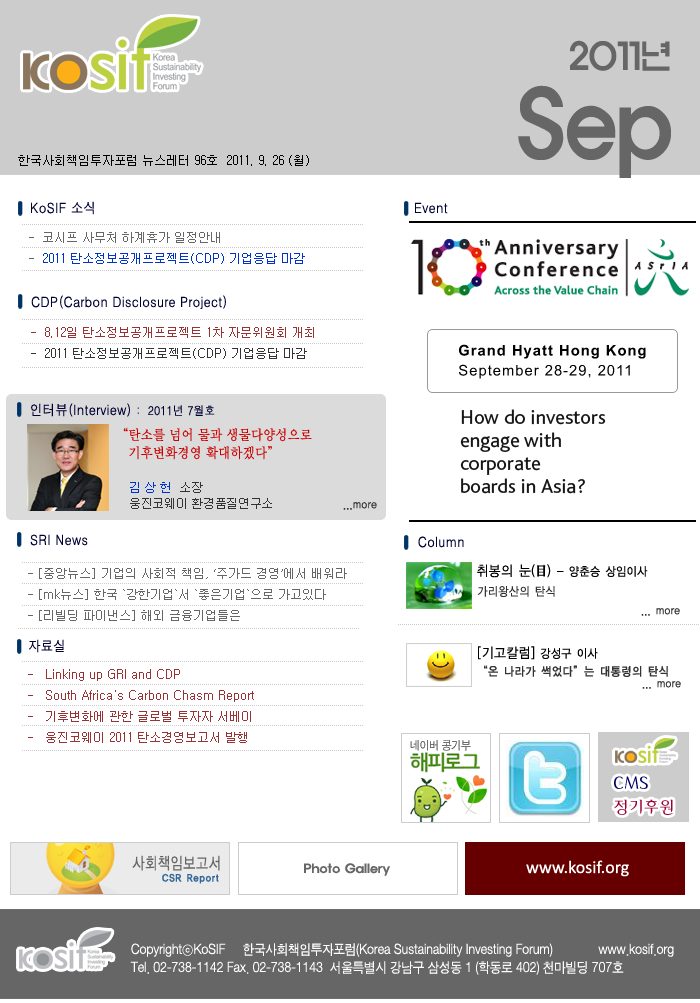
<style>
.page{position:relative;width:700px;height:1003px;background:#ffffff}
.page>*{position:absolute;margin:0}
.t1{font:36.1px/41.9px "ExpoM-HM";color:#666666;scale:0.89 1}
.t2{font:90.2px/41.9px "ExpoM-HM";color:#666666;scale:0.89 1}
.t3{font:12px "Gulim";color:#000000}
.t4{font:14px "H2gtrM";color:#000033;scale:0.9 1}
.t5{font:12px "Gulim";color:#0033cc}
.t6{font:12px "Gulim";color:#666666}
.t7{font:12px "Gulim";color:#993333}
.t8{font:12px "Gulim";color:#333333}
.t9{font:12px "H2gtrM";color:#000033;scale:0.9 1}
.t10{font:14px/18px "Ymjo420";letter-spacing:-0.025em;color:#cc0000;scale:0.9 1}
.t11{font:14px/12px "Ymjo420";letter-spacing:-0.025em;color:#cc0000;scale:0.9 1}
.t12{font:12px/16px "Gulim";letter-spacing:-0.025em;color:#333333}
.t13{font:12px/16px "Gulim";letter-spacing:-0.025em;color:#0033cc}
.t14{font:12px "YDIYGO120-KSCpc-EUC-H";letter-spacing:-0.025em;color:#333333;scale:0.9 1}
.t15{font:12px "YDIYGO120-KSCpc-EUC-H";letter-spacing:-0.025em;color:#000000;scale:0.9 1}
.t16{font:14px "YDIYGO120-KSCpc-EUC-H";letter-spacing:-0.025em;color:#000000;scale:0.9 1}
.t17{font:14px "YDIYMjO150";letter-spacing:-0.025em;color:#000000;scale:0.9 1}
.t18{font:12px "YDIYGO130-KSCpc-EUC-H";letter-spacing:-0.01em;color:#333333;scale:0.9 1}
.t19{font:12px "ExpoM-HM";color:#666666}
.t20{font:18px "Calibri";color:#ffffff}
.t21{font:14px/18px "SandJg";color:#ffffff;scale:0.9 1}
</style>
<div class="page">
<p class="t1" style="left:518px;top:40px;width:153px;height:138px;text-align:right">2011년<br><span class="t2">Sep</span></p>
<p class="t3" style="left:18px;top:155px;width:291px;height:11px">한국사회책임투자포럼 뉴스레터 96호  2011. 9. 26 (월)</p>
<p class="t4" style="left:31px;top:201px;width:63px;height:14px">KoSIF 소식</p>
<p class="t4" style="left:415px;top:202px;width:33px;height:12px">Event</p>
<p class="t5" style="left:29px;top:232px;width:276px;height:32px"><span class="t6">-  코시프 사무처 하계휴가 일정안내<br>-  </span>2011 탄소정보공개프로젝트(CDP) 기업응답 마감</p>
<p class="t4" style="left:31px;top:295px;width:195px;height:14px">CDP(Carbon Disclosure Project)</p>
<p class="t7" style="left:31px;top:327px;width:283px;height:32px">-  8.12일 탄소정보공개프로젝트 1차 자문위원회 개최 <br><span class="t8">-  2011 탄소정보공개프로젝트(CDP) 기업응답 마감</span></p>
<p class="t4" style="left:31px;top:403px;width:184px;height:14px">인터뷰(Interview) <span class="t9">:  2011년 7월호</span></p>
<p class="t10" style="left:123px;top:427px;width:189px;height:33px"><span class="t11">“탄소를 넘어 물과 생</span>물다양성으로 <br>   기후변화경영 확대<span class="t11">하겠다”</span></p>
<p class="t12" style="left:130px;top:482px;width:142px;height:27px"><span class="t13">김 상 헌  </span>소장 <br>웅진코웨이 환경품질연구소</p>
<p class="t14" style="left:343px;top:502px;width:34px;height:8px">...more</p>
<p class="t4" style="left:30px;top:534px;width:58px;height:12px">SRI News</p>
<p class="t4" style="left:418px;top:536px;width:46px;height:12px">Column</p>
<p class="t6" style="left:28px;top:568px;width:319px;height:53px">- [중앙뉴스] 기업의 사회적 책임, ‘주가드 경영’에서 배워라  <br>- [mk뉴스] 한국 `강한기업`서 `좋은기업`으로 가고있다 <br>- [리빌딩 파이낸스] 해외 금융기업들은</p>
<p class="t15" style="left:477px;top:564px;width:171px;height:14px"><span class="t16">취봉의 눈(</span><span class="t17">目</span><span class="t16">) </span>- 양춘승 상임이사</p>
<p class="t14" style="left:477px;top:586px;width:78px;height:11px">가리왕산의 탄식</p>
<p class="t14" style="left:641px;top:608px;width:39px;height:8px">... more</p>
<p class="t4" style="left:29px;top:639px;width:35px;height:14px">자료실</p>
<p class="t16" style="left:478px;top:646px;width:120px;height:14px">[기고칼럼]<span class="t15"> 강성구 이사</span></p>
<p class="t18" style="left:484px;top:665px;width:184px;height:12px">“온 나라가 썩었다”는 대통령의 탄식</p>
<p class="t7" style="left:28px;top:669px;width:226px;height:74px">-   Linking up GRI and CDP<br>-   South Africa's Carbon Chasm Report<br>-   기후변화에 관한 글로벌 투자자 서베이<br>-   웅진코웨이 2011 탄소경영보고서 발행</p>
<p class="t14" style="left:642px;top:681px;width:39px;height:8px">... more</p>
<p class="t19" style="left:304px;top:863px;width:86px;height:13px">Photo Gallery</p>
<p class="t20" style="left:526px;top:860px;width:103px;height:17px">www.kosif.org</p>
<p class="t21" style="left:130px;top:943px;width:544px;height:32px">CopyrightⓒKoSIF     한국사회책임투자포럼(Korea Sustainability Investing Forum)             www.kosif.org <br>Tel. 02-738-1142 Fax. 02-738-1143  서울특별시 강남구 삼성동 1 (학동로 402) 천마빌딩 707호</p>
</div>
